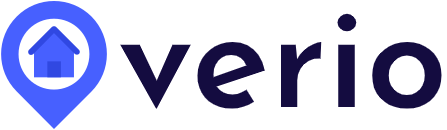
<style>
.page{position:relative;width:447px;height:130px;background:#ffffff}
.page>*{position:absolute;margin:0}
.t1{font:147px "JosefinSans-SemiBold";color:#140c40}
</style>
<div class="page">
<p class="t1" style="left:120px;top:13px;width:322px;height:96px">verio</p>
</div>
